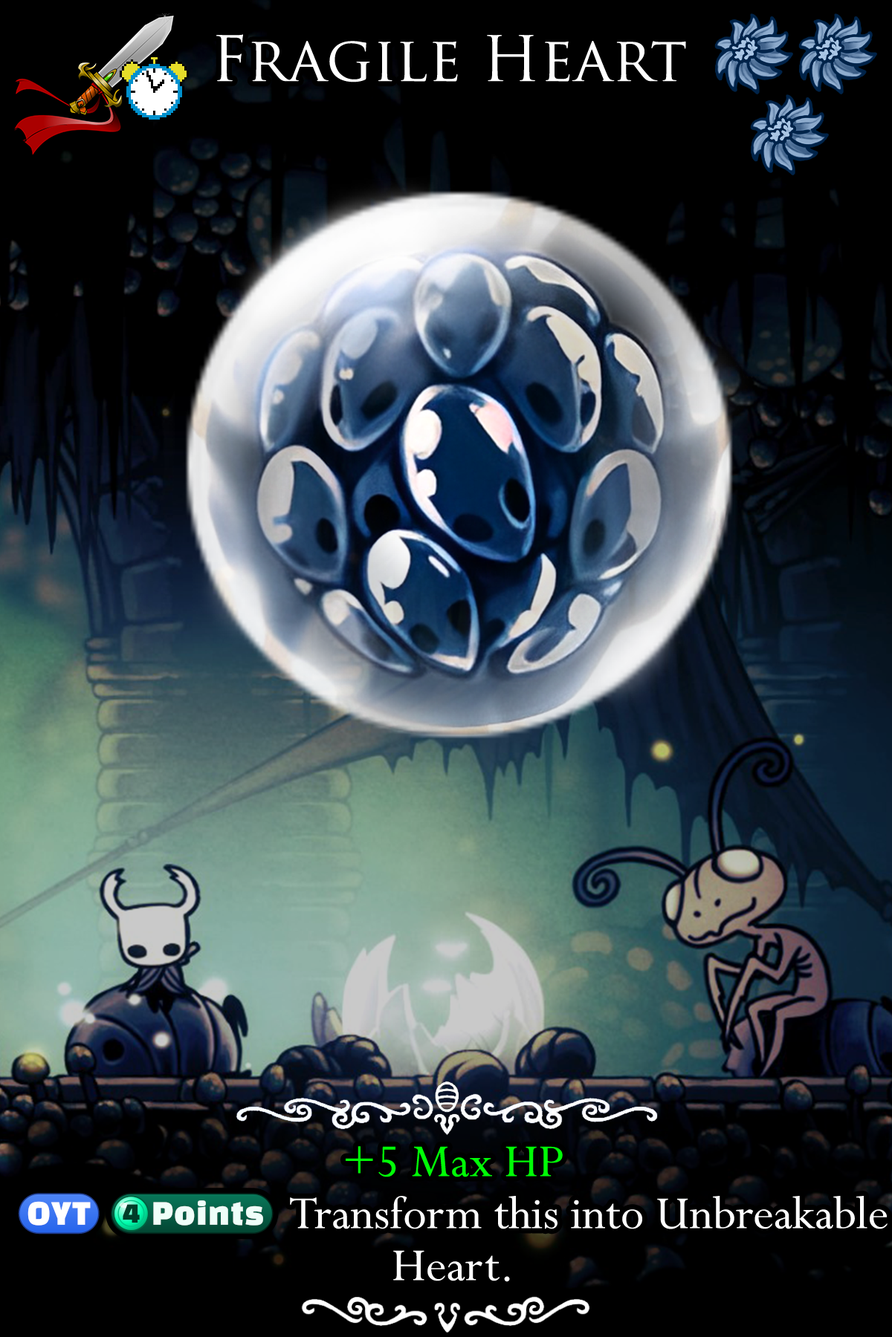
<style>
.page{position:relative;width:892px;height:1337px;background:#000000}
.page>*{position:absolute;margin:0}
.t1{font:104.8px "TrajanPro-Regular";color:#ffffff}
.t2{font:87.7px/52px "Perpetua"}
.t3{font:71.4px/52px "stoogedings-Regular";letter-spacing:0.225em}
</style>
<div class="page">
<p class="t1" style="left:215px;top:34px;width:471px;height:48px">Fragile Heart</p>
<p class="t2" style="left:18px;top:1146px;width:869px;height:136px;text-align:center">+5 Max HP<br><span class="t3">(OYT)(4 points)</span> Transform this into Unbreakable Heart.</p>
</div>
